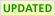
<style>
.page{position:relative;width:55px;height:16px;background:#fafab8}
.page>*{position:absolute;margin:0}
.t1{font:11px "Frutiger-Bold";color:#039803}
</style>
<div class="page">
<p class="t1" style="left:3px;top:4px;width:49px;height:9px">UPDATED</p>
</div>
